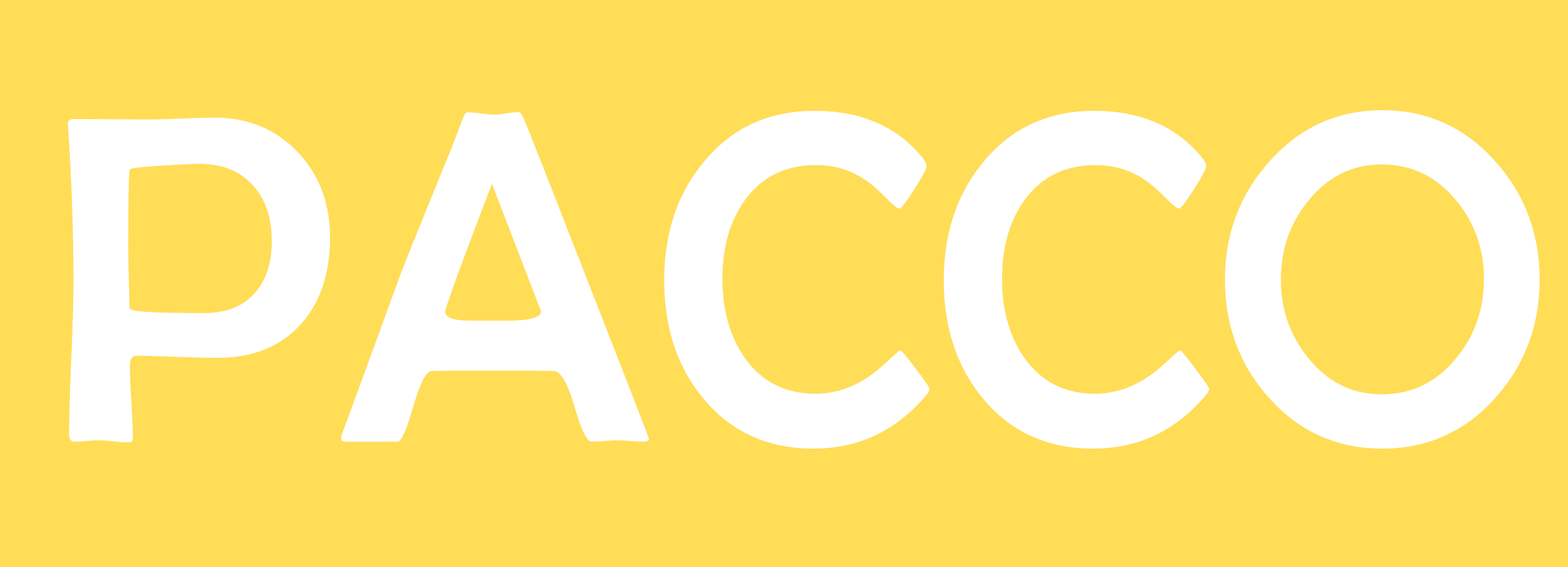
<style>
.page{position:relative;width:1568px;height:567px;background:#ffdd57}
.page>*{position:absolute;margin:0}
.t1{font:472.3px "BerlinSansFB-Reg";color:#ffffff}
</style>
<div class="page">
<p class="t1" style="left:67px;top:110px;width:1473px;height:338px">PACCO</p>
</div>
